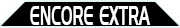
<style>
.page{position:relative;width:180px;height:28px;background:#000000}
.page>*{position:absolute;margin:0}
.t1{font:26.7px "HandelGothicBT-Regular";color:#ffffff;scale:0.56 1}
</style>
<div class="page">
<p class="t1" style="left:30px;top:6px;width:120px;height:19px">ENCORE EXTRA</p>
</div>
